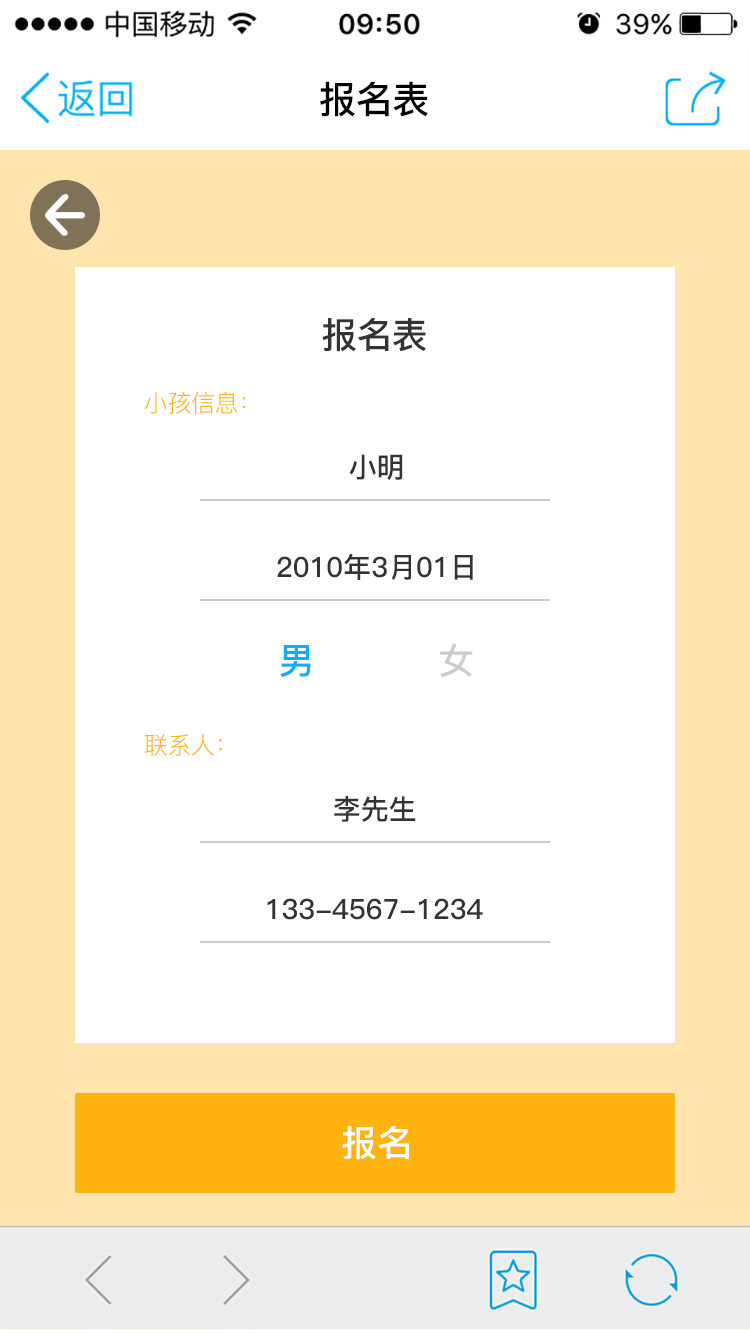
<style>
.page{position:relative;width:750px;height:1334px;background:#ffffff}
.page>*{position:absolute;margin:0}
.t1{font:37.5px "PingFang-SC-Bold";letter-spacing:-0.02em;color:#000000}
.t2{font:36px "PingFang-SC-Bold";letter-spacing:-0.02em;color:#333333}
.t3{font:24px "PingFang-SC-Regular";letter-spacing:-0.02em;color:#feb310}
.t4{font:28px "PingFang-SC-Bold";color:#333333}
.t5{font:36px "PingFang-SC-Bold";color:#10adfe}
.t6{font:36px "PingFang-SC-Bold";color:#cccccc}
.t7{font:36px "PingFang-SC-Bold";color:#ffffff}
</style>
<div class="page">
<p class="t1" style="left:320px;top:81px;width:108px;height:36px">报名表</p>
<p class="t2" style="left:322px;top:318px;width:104px;height:34px">报名表</p>
<p class="t3" style="left:144px;top:391px;width:102px;height:23px">小孩信息：</p>
<p class="t4" style="left:349px;top:454px;width:54px;height:26px">小明</p>
<p class="t4" style="left:277px;top:553px;width:196px;height:27px">2010年3月01日</p>
<p class="t5" style="left:280px;top:645px;width:31px;height:32px">男</p>
<p class="t6" style="left:440px;top:643px;width:33px;height:34px">女</p>
<p class="t3" style="left:145px;top:734px;width:77px;height:22px">联系人：</p>
<p class="t4" style="left:334px;top:796px;width:82px;height:26px">李先生</p>
<p class="t4" style="left:267px;top:898px;width:216px;height:22px">133-4567-1234</p>
<p class="t7" style="left:342px;top:1126px;width:67px;height:34px">报名</p>
</div>
